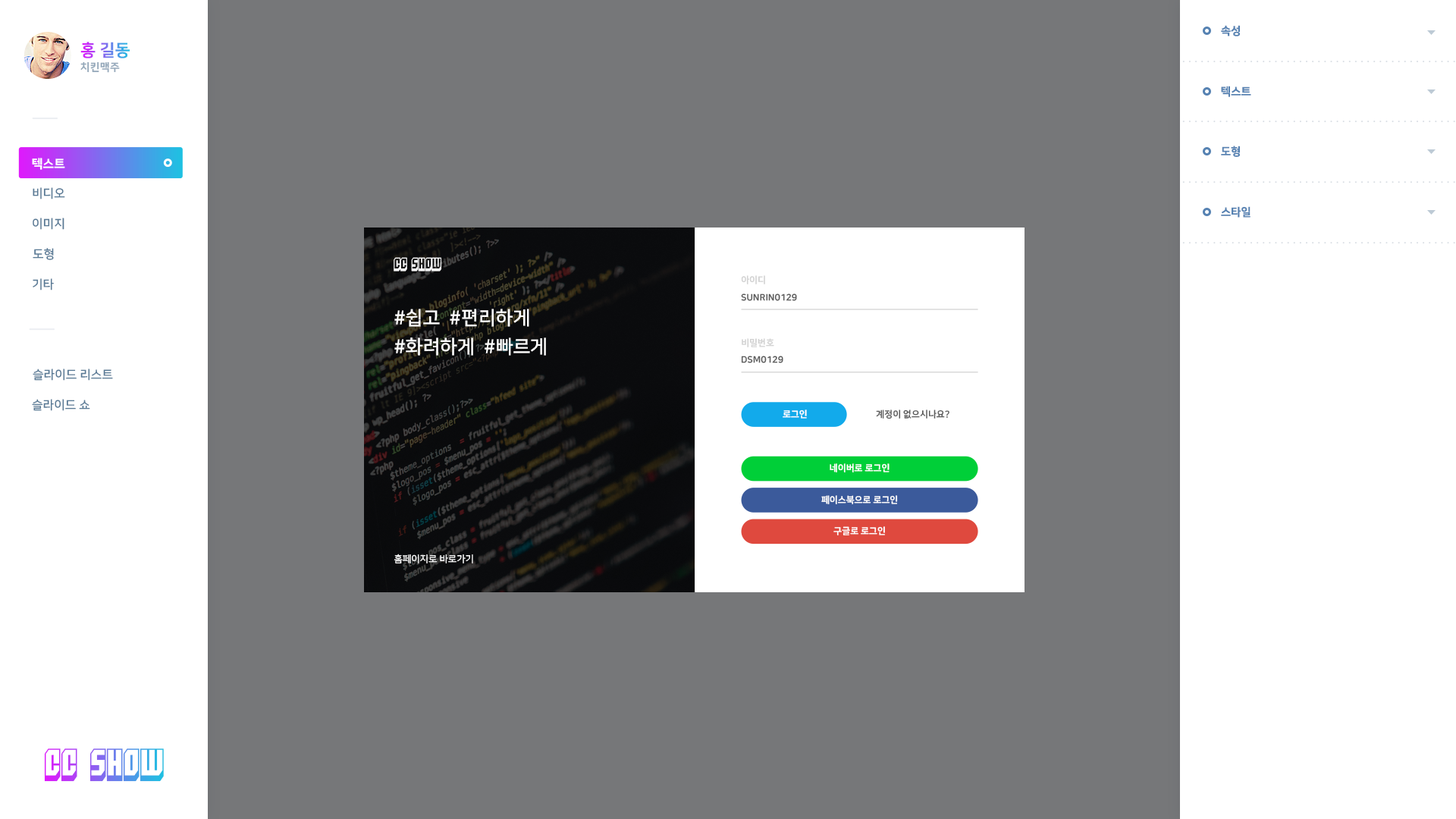
<style>
.page{position:relative;width:1456px;height:819px;background:#767779}
.page>*{position:absolute;margin:0}
.t1{font:11.1px "NanumSquareEB";color:#5682b2}
.t2{font:16.7px "NanumSquareEB";text-transform:uppercase}
.t3{font:10.6px "NanumSquareEB";letter-spacing:0.025em;color:#94a8ba;text-transform:uppercase}
.t4{font:12.1px "NanumSquareEB";color:#ffffff;text-transform:uppercase}
.t5{font:12.1px "NanumSquareB";color:#597a96;text-transform:uppercase}
.t6{font:12.6px "Blockt";color:#ffffff;text-transform:uppercase}
.t7{font:9.1px "NanumSquareEB";color:#d2d2d2;text-transform:uppercase}
.t8{font:9.1px "NanumSquareEB";color:#5b5b5b;text-transform:uppercase}
.t9{font:19px/28.4px "NanumSquareB";color:#ffffff;text-transform:uppercase}
.t10{font:9.1px "NanumSquareEB";color:#ffffff;text-transform:uppercase}
.t11{font:9.5px "NanumSquareR";color:#ffffff;text-transform:uppercase}
.t12{font:31.6px "Blockt"}
</style>
<div class="page">
<p class="t1" style="left:1221px;top:25px;width:19px;height:11px">속성</p>
<p class="t2" style="left:80px;top:42px;width:50px;height:16px">홍 길동</p>
<p class="t3" style="left:80px;top:61px;width:40px;height:12px">치킨맥주</p>
<p class="t1" style="left:1221px;top:86px;width:30px;height:11px">텍스트</p>
<p class="t1" style="left:1221px;top:146px;width:19px;height:11px">도형</p>
<p class="t4" style="left:32px;top:158px;width:33px;height:12px">텍스트</p>
<p class="t5" style="left:33px;top:187px;width:32px;height:12px">비디오</p>
<p class="t1" style="left:1221px;top:206px;width:29px;height:12px">스타일</p>
<p class="t5" style="left:33px;top:218px;width:31px;height:12px">이미지</p>
<p class="t5" style="left:33px;top:248px;width:21px;height:12px">도형</p>
<p class="t6" style="left:394px;top:257px;width:47px;height:14px">CC Show</p>
<p class="t5" style="left:33px;top:278px;width:21px;height:12px">기타</p>
<p class="t7" style="left:741px;top:275px;width:24px;height:9px">아이디</p>
<p class="t8" style="left:741px;top:293px;width:56px;height:8px">sunrin0129</p>
<p class="t9" style="left:394px;top:309px;width:152px;height:47px">#쉽고  #편리하게<br>#화려하게  #빠르게</p>
<p class="t7" style="left:742px;top:338px;width:32px;height:9px">비밀번호</p>
<p class="t8" style="left:741px;top:356px;width:42px;height:7px">dsm0129</p>
<p class="t5" style="left:33px;top:369px;width:80px;height:12px">슬라이드 리스트</p>
<p class="t5" style="left:32px;top:399px;width:58px;height:12px">슬라이드 쇼</p>
<p class="t10" style="left:783px;top:409px;width:24px;height:10px">로그인</p>
<p class="t8" style="left:876px;top:409px;width:73px;height:10px">계정이 없으시나요?</p>
<p class="t10" style="left:830px;top:463px;width:60px;height:9px">네이버로 로그인</p>
<p class="t10" style="left:821px;top:495px;width:77px;height:9px">페이스북으로 로그인</p>
<p class="t10" style="left:833px;top:526px;width:52px;height:9px">구글로 로그인</p>
<p class="t11" style="left:394px;top:554px;width:79px;height:9px">홈페이지로 바로가기</p>
<p class="t12" style="left:44px;top:748px;width:120px;height:34px">CC SHOW</p>
</div>
